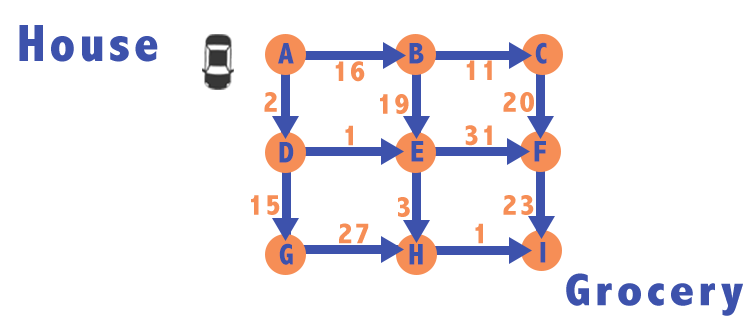
<style>
.page{position:relative;width:747px;height:316px;background:#ffffff}
.page>*{position:absolute;margin:0}
.t1{font:52.8px "AbadiMT-CondensedExtraBold";letter-spacing:0.075em;color:#3d52ac}
.t2{font:30px "AbadiMT-CondensedExtraBold";letter-spacing:0.075em;color:#3d52ac}
.t3{font:30px "AbadiMT-CondensedExtraBold";letter-spacing:0.075em;color:#f68e56}
.t4{font:46px "AbadiMT-CondensedExtraBold";letter-spacing:0.075em;color:#3d52ac;scale:1.15 1}
</style>
<div class="page">
<p class="t1" style="left:19px;top:25px;width:139px;height:37px">House</p>
<p class="t2" style="left:278px;top:43px;width:16px;height:21px">A</p>
<p class="t2" style="left:409px;top:43px;width:15px;height:21px">B</p>
<p class="t2" style="left:535px;top:42px;width:12px;height:22px">C</p>
<p class="t3" style="left:335px;top:61px;width:30px;height:21px">16</p>
<p class="t3" style="left:466px;top:60px;width:26px;height:20px">11</p>
<p class="t3" style="left:264px;top:92px;width:13px;height:20px">2</p>
<p class="t3" style="left:380px;top:94px;width:29px;height:20px">19</p>
<p class="t3" style="left:503px;top:92px;width:31px;height:20px">20</p>
<p class="t3" style="left:345px;top:125px;width:8px;height:21px">1</p>
<p class="t3" style="left:465px;top:125px;width:27px;height:21px">31</p>
<p class="t2" style="left:279px;top:142px;width:15px;height:21px">D</p>
<p class="t2" style="left:411px;top:141px;width:13px;height:21px">E</p>
<p class="t2" style="left:534px;top:141px;width:12px;height:21px">F</p>
<p class="t3" style="left:251px;top:195px;width:29px;height:20px">15</p>
<p class="t3" style="left:398px;top:197px;width:12px;height:20px">3</p>
<p class="t3" style="left:503px;top:195px;width:31px;height:20px">23</p>
<p class="t3" style="left:339px;top:223px;width:30px;height:21px">27</p>
<p class="t3" style="left:475px;top:223px;width:8px;height:21px">1</p>
<p class="t2" style="left:279px;top:243px;width:14px;height:22px">G</p>
<p class="t2" style="left:409px;top:244px;width:14px;height:21px">H</p>
<p class="t2" style="left:540px;top:242px;width:6px;height:21px">I</p>
<p class="t4" style="left:566px;top:273px;width:177px;height:43px">Grocery</p>
</div>
